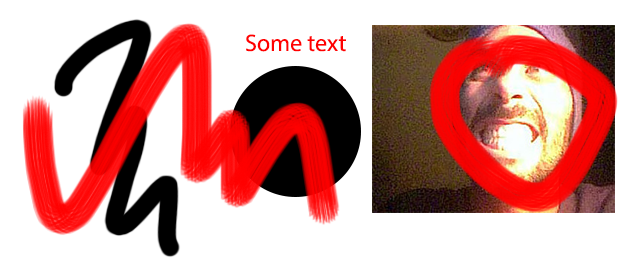
<style>
.page{position:relative;width:633px;height:267px;background:#ffffff}
.page>*{position:absolute;margin:0}
.t1{font:24px "MyriadPro-Regular";color:#ff0000}
</style>
<div class="page">
<p class="t1" style="left:246px;top:34px;width:100px;height:18px">Some text</p>
</div>
